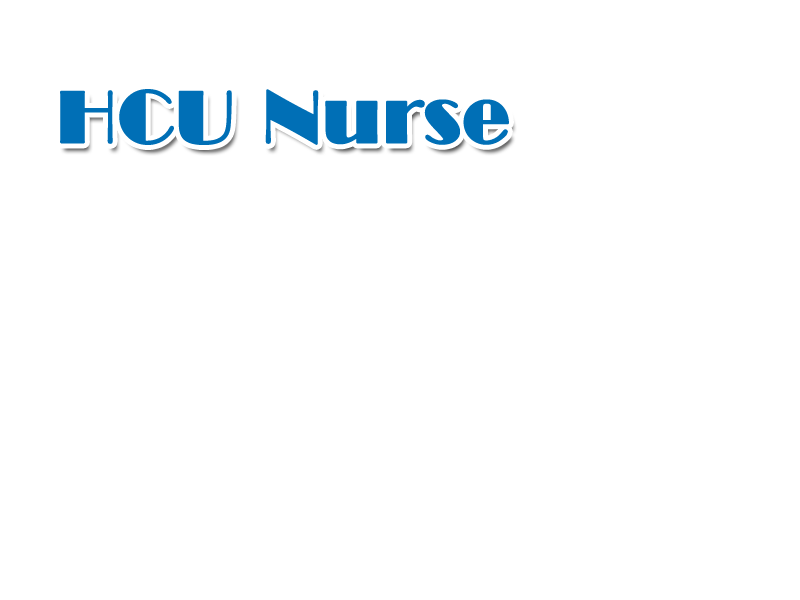
<style>
.page{position:relative;width:800px;height:600px;background:#ffffff}
.page>*{position:absolute;margin:0}
.t1{font:72px "BroadwayBT-Regular";color:#006fb6;font-weight:bold}
</style>
<div class="page">
<p class="t1" style="left:60px;top:89px;width:449px;height:56px">HCU Nurse</p>
</div>
